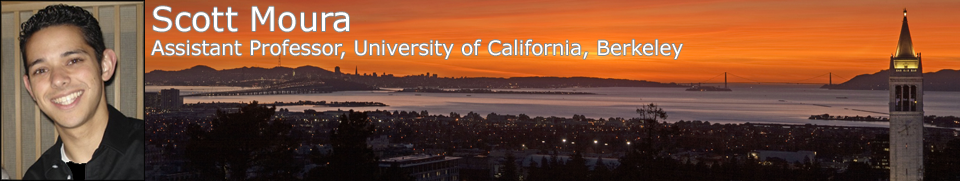
<style>
.page{position:relative;width:960px;height:181px}
.page>*{position:absolute;margin:0}
.t1{font:20px "Verdana";color:#ffffff}
.t2{font:33.3px "Verdana";color:#ffffff}
</style>
<div class="page">
<p class="t1" style="left:151px;top:6px;width:532px;height:53px"><span class="t2">Scott Moura<br></span>Assistant Professor, University of California, Berkeley</p>
</div>
